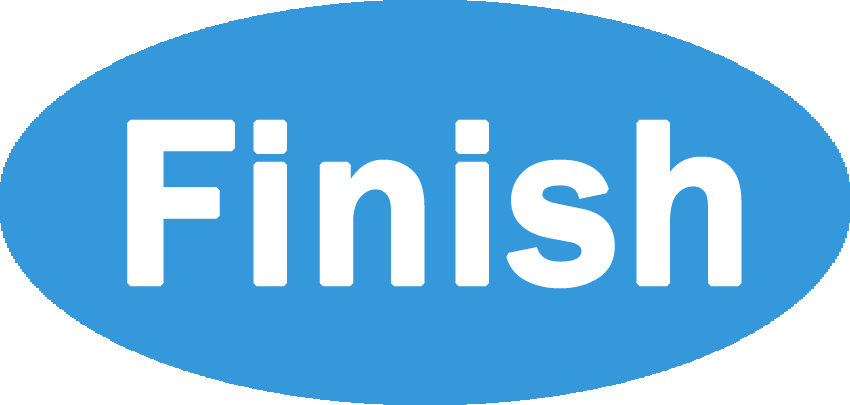
<style>
.page{position:relative;width:850px;height:405px;background:#3498db}
.page>*{position:absolute;margin:0}
.t1{font:240px "FranklinGothic-Medium";color:#ffffff;font-weight:bold}
</style>
<div class="page">
<p class="t1" style="left:127px;top:119px;width:615px;height:170px">Finish</p>
</div>
